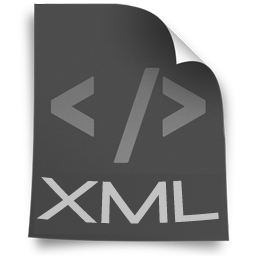
<style>
.page{position:relative;width:256px;height:256px;background:#ffffff}
.page>*{position:absolute;margin:0}
.t1{font:57.9px "PirulenRg-Regular";color:#c2c2c2}
</style>
<div class="page">
<p class="t1" style="left:37px;top:177px;width:182px;height:47px">XML</p>
</div>
